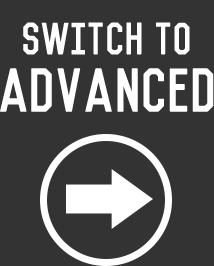
<style>
.page{position:relative;width:214px;height:266px;background:#333333}
.page>*{position:absolute;margin:0}
.t1{font:41.9px "Vincent-Regular";color:#ffffff}
.t2{font:57px "Vincent-Regular";color:#ffffff}
</style>
<div class="page">
<p class="t1" style="left:23px;top:22px;width:167px;height:33px">Switch to</p>
<p class="t2" style="left:0px;top:68px;width:214px;height:44px">Advanced</p>
</div>
